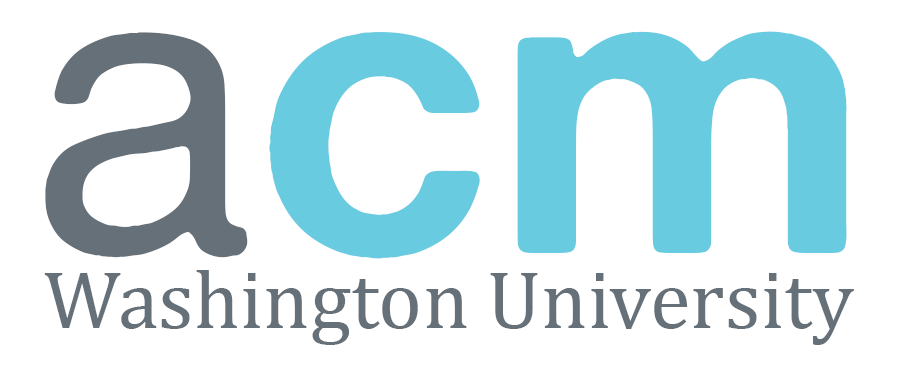
<style>
.page{position:relative;width:912px;height:379px;background:#ffffff}
.page>*{position:absolute;margin:0}
.t1{font:416.7px "AlteHaasGrotesk_Bold";color:#69cbe0}
.t2{font:416.7px "AlteHaasGrotesk";color:#667078}
.t3{font:83.3px "CambriaMath";color:#667078}
</style>
<div class="page">
<p class="t1" style="left:45px;top:31px;width:802px;height:228px"><span class="t2">a</span>cm</p>
<p class="t3" style="left:44px;top:270px;width:810px;height:75px">Washington University</p>
</div>
